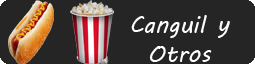
<style>
.page{position:relative;width:255px;height:64px;background:#252525}
.page>*{position:absolute;margin:0}
.t1{font:24px "MVBoli";color:#ffffff}
</style>
<div class="page">
<p class="t1" style="left:131px;top:15px;width:99px;height:47px;text-align:center">Canguil y Otros</p>
</div>
